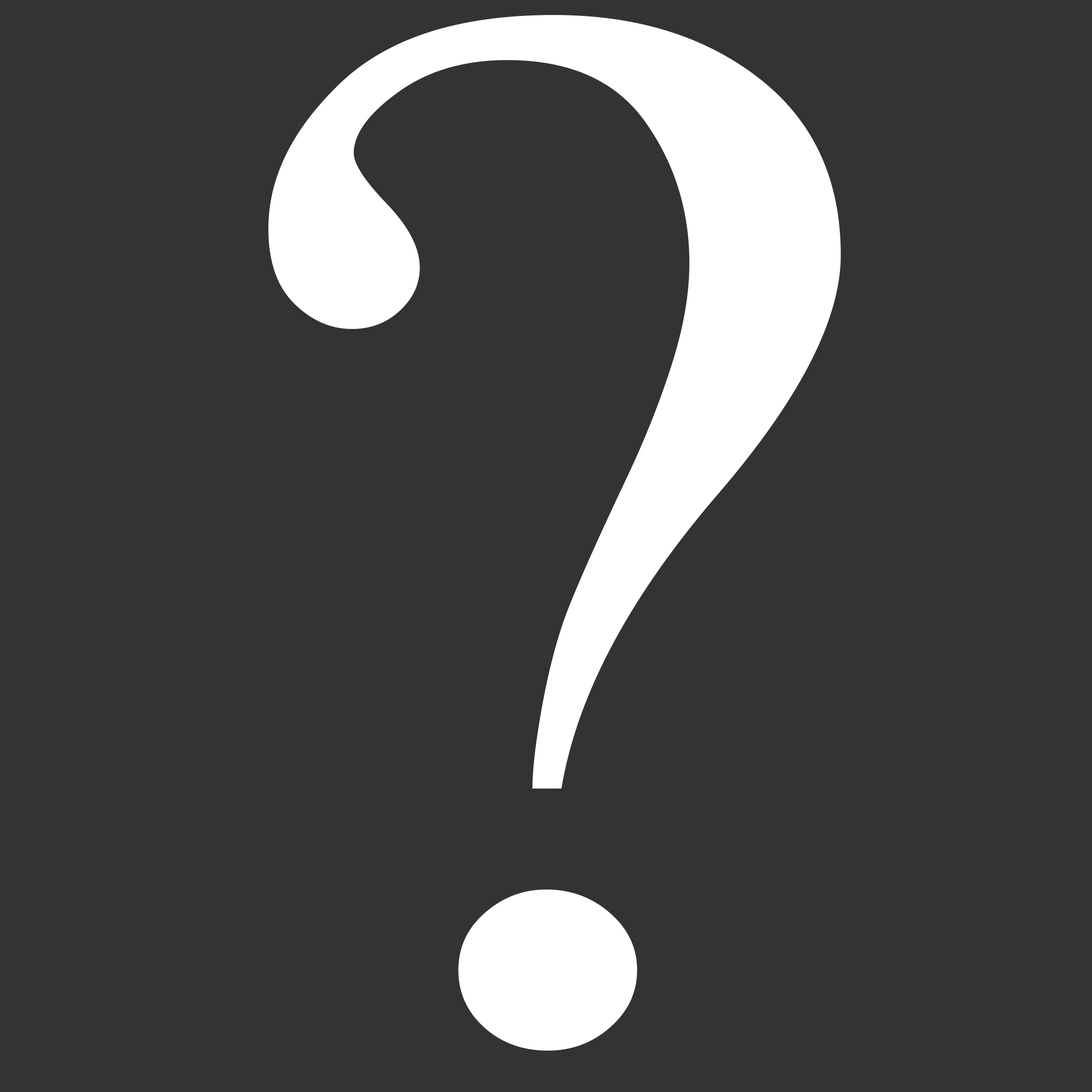
<style>
.page{position:relative;width:1092px;height:1092px;background:#333333}
.page>*{position:absolute;margin:0}
.t1{font:1513.2px "Times-Roman";color:#ffffff;scale:1.09 1}
</style>
<div class="page">
<p class="t1" style="left:268px;top:15px;width:573px;height:1036px">?</p>
</div>
